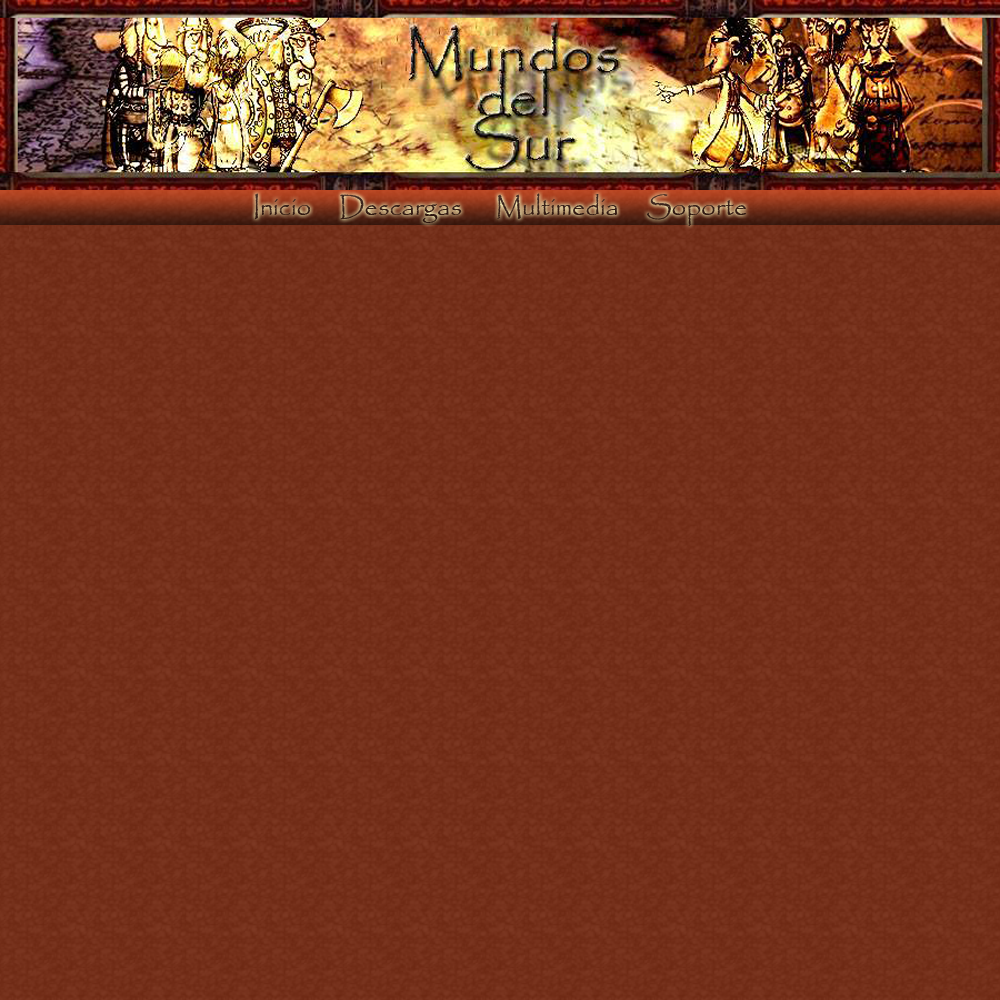
<style>
.page{position:relative;width:1000px;height:1000px}
.page>*{position:absolute;margin:0}
.t1{font:26px "Papyrus-Regular";color:#361e17}
</style>
<div class="page">
<p class="t1" style="left:254px;top:193px;width:493px;height:33px">Inicio     Descargas      Multimedia     Soporte</p>
</div>
